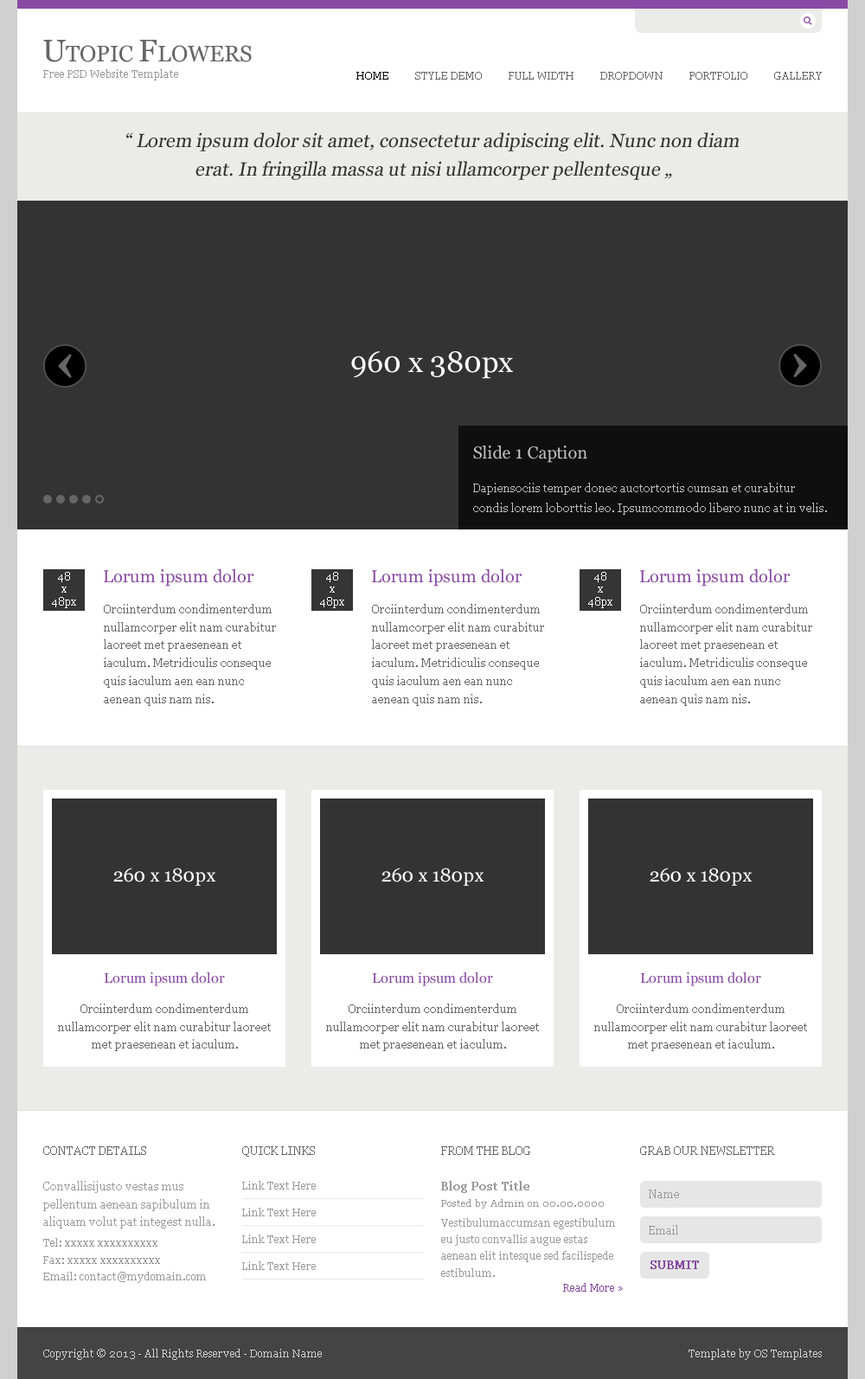
<style>
.page{position:relative;width:865px;height:1379px;background:#ffffff}
.page>*{position:absolute;margin:0}
.t1{font:22.5px "Georgia";color:#666666}
.t2{font:31.1px "Georgia";color:#666666}
.t3{font:10.4px "Georgia";color:#999999}
.t4{font:10.4px "Georgia";color:#000000}
.t5{font:10.4px "Georgia";color:#666666}
.t6{font:19px/28.5px "Georgia";color:#333333;font-style:italic}
.t7{font:19px/19px "Georgia";color:#333333;font-style:italic}
.t8{font:29.4px "Georgia";color:#ffffff}
.t9{font:17.3px "Georgia";color:#c2c2c2}
.t10{font:11.2px/20.2px "Georgia";color:#bfbfbf}
.t11{font:17.3px "Georgia";color:#894aa3}
.t12{font:10.4px/12.5px "Georgia";color:#ffffff}
.t13{font:11.2px/18px "Georgia";color:#666666}
.t14{font:19px "Georgia";color:#ffffff}
.t15{font:13.8px "Georgia";color:#894aa3}
.t16{font:11.2px "Georgia";color:#666666}
.t17{font:11.2px/18px "Georgia";color:#999999}
.t18{font:10.4px/20.8px "Georgia";color:#999999}
.t19{font:10.4px/16.6px "Georgia";color:#999999}
.t20{font:11.2px "Georgia";color:#999999;font-weight:bold}
.t21{font:11.2px "Georgia";color:#999999}
.t22{font:9.5px "Georgia";color:#999999}
.t23{font:11.2px "Georgia";color:#874ca0;font-weight:bold}
.t24{font:10.4px "Georgia";color:#874ca0}
.t25{font:10.4px "Georgia";color:#d0d0d0}
</style>
<div class="page">
<p class="t1" style="left:43px;top:40px;width:209px;height:22px"><span class="t2">U</span>TOPIC <span class="t2">F</span>LOWERS</p>
<p class="t3" style="left:43px;top:69px;width:135px;height:11px">Free PSD Website Template</p>
<p class="t4" style="left:356px;top:72px;width:32px;height:8px">HOME</p>
<p class="t5" style="left:415px;top:72px;width:67px;height:8px">STYLE DEMO</p>
<p class="t5" style="left:509px;top:72px;width:64px;height:8px">FULL WIDTH</p>
<p class="t5" style="left:600px;top:72px;width:63px;height:8px">DROPDOWN</p>
<p class="t5" style="left:689px;top:72px;width:58px;height:8px">PORTFOLIO</p>
<p class="t5" style="left:774px;top:72px;width:48px;height:8px">GALLERY</p>
<p class="t6" style="left:126px;top:132px;width:613px;height:48px;text-align:center"><span class="t7">“</span> Lorem ipsum dolor sit amet, consectetur adipiscing elit. Nunc non diam <br>erat. In fringilla massa ut nisi ullamcorper pellentesque „</p>
<p class="t8" style="left:351px;top:351px;width:162px;height:28px">960 x 380px</p>
<p class="t9" style="left:473px;top:445px;width:114px;height:18px">Slide 1 Caption</p>
<p class="t10" style="left:473px;top:483px;width:354px;height:32px">Dapiensociis temper donec auctortortis cumsan et curabitur condis lorem loborttis leo. Ipsumcommodo libero nunc at in velis.</p>
<p class="t11" style="left:104px;top:569px;width:150px;height:17px">Lorum ipsum dolor</p>
<p class="t11" style="left:372px;top:569px;width:150px;height:17px">Lorum ipsum dolor</p>
<p class="t11" style="left:640px;top:569px;width:151px;height:17px">Lorum ipsum dolor</p>
<p class="t12" style="left:52px;top:572px;width:24px;height:36px;text-align:center">48<br>x<br>48px</p>
<p class="t12" style="left:320px;top:572px;width:24px;height:36px;text-align:center">48<br>x<br>48px</p>
<p class="t12" style="left:588px;top:572px;width:24px;height:36px;text-align:center">48<br>x<br>48px</p>
<p class="t13" style="left:104px;top:604px;width:172px;height:102px">Orciinterdum condimenterdum nullamcorper elit nam curabitur laoreet met praesenean et iaculum. Metridiculis conseque quis iaculum aen ean nunc aenean quis nam nis.</p>
<p class="t13" style="left:372px;top:604px;width:172px;height:102px">Orciinterdum condimenterdum nullamcorper elit nam curabitur laoreet met praesenean et iaculum. Metridiculis conseque quis iaculum aen ean nunc aenean quis nam nis.</p>
<p class="t13" style="left:640px;top:604px;width:172px;height:102px">Orciinterdum condimenterdum nullamcorper elit nam curabitur laoreet met praesenean et iaculum. Metridiculis conseque quis iaculum aen ean nunc aenean quis nam nis.</p>
<p class="t14" style="left:113px;top:868px;width:103px;height:18px">260 x 180px</p>
<p class="t14" style="left:381px;top:868px;width:103px;height:18px">260 x 180px</p>
<p class="t14" style="left:650px;top:868px;width:102px;height:18px">260 x 180px</p>
<p class="t15" style="left:104px;top:972px;width:121px;height:14px">Lorum ipsum dolor</p>
<p class="t15" style="left:372px;top:972px;width:121px;height:14px">Lorum ipsum dolor</p>
<p class="t15" style="left:640px;top:972px;width:121px;height:14px">Lorum ipsum dolor</p>
<p class="t13" style="left:58px;top:1003px;width:213px;height:48px;text-align:center">Orciinterdum condimenterdum nullamcorper elit nam curabitur laoreet met praesenean et iaculum.</p>
<p class="t13" style="left:326px;top:1003px;width:213px;height:48px;text-align:center">Orciinterdum condimenterdum nullamcorper elit nam curabitur laoreet met praesenean et iaculum.</p>
<p class="t13" style="left:594px;top:1003px;width:213px;height:48px;text-align:center">Orciinterdum condimenterdum nullamcorper elit nam curabitur laoreet met praesenean et iaculum.</p>
<p class="t16" style="left:43px;top:1146px;width:103px;height:9px">CONTACT DETAILS</p>
<p class="t16" style="left:242px;top:1146px;width:73px;height:10px">QUICK LINKS</p>
<p class="t16" style="left:441px;top:1146px;width:89px;height:9px">FROM THE BLOG</p>
<p class="t16" style="left:640px;top:1146px;width:135px;height:9px">GRAB OUR NEWSLETTER</p>
<p class="t17" style="left:43px;top:1181px;width:171px;height:102px">Convallisijusto vestas mus pellentum aenean sapibulum in aliquam volut pat integest nulla. <br><span class="t18">Tel: xxxxx xxxxxxxxxx<br></span><span class="t19">Fax: xxxxx xxxxxxxxxx<br>Email: contact@mydomain.com</span></p>
<p class="t3" style="left:242px;top:1181px;width:74px;height:8px">Link Text Here</p>
<p class="t20" style="left:441px;top:1181px;width:88px;height:12px">Blog Post Title</p>
<p class="t21" style="left:649px;top:1189px;width:30px;height:9px">Name</p>
<p class="t22" style="left:441px;top:1199px;width:163px;height:9px">Posted by Admin on 00.00.0000</p>
<p class="t3" style="left:242px;top:1207px;width:74px;height:9px">Link Text Here</p>
<p class="t19" style="left:441px;top:1218px;width:174px;height:59px">Vestibulumaccumsan egestibulum eu justo convallis augue estas aenean elit intesque sed facilispede estibulum.</p>
<p class="t21" style="left:649px;top:1225px;width:29px;height:9px">Email</p>
<p class="t3" style="left:242px;top:1234px;width:74px;height:9px">Link Text Here</p>
<p class="t3" style="left:242px;top:1261px;width:74px;height:9px">Link Text Here</p>
<p class="t23" style="left:650px;top:1260px;width:49px;height:9px">SUBMIT</p>
<p class="t24" style="left:563px;top:1283px;width:60px;height:8px">Read More »</p>
<p class="t25" style="left:43px;top:1348px;width:279px;height:12px">Copyright © 2013 - All Rights Reserved - Domain Name</p>
<p class="t25" style="left:688px;top:1348px;width:134px;height:12px">Template by OS Templates</p>
</div>
